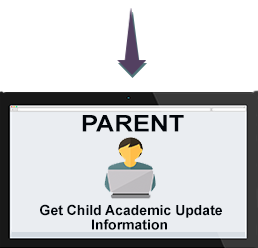
<style>
.page{position:relative;width:258px;height:248px;background:#eaedf1}
.page>*{position:absolute;margin:0}
.t1{font:23.1px "Arial-BoldMT";color:#00040a;scale:1.1 1}
.t2{font:14px "Arial-BoldMT";color:#00040a}
</style>
<div class="page">
<p class="t1" style="left:82px;top:115px;width:102px;height:17px">PARENT</p>
<p class="t2" style="left:40px;top:204px;width:182px;height:14px">Get Child Academic Update</p>
<p class="t2" style="left:92px;top:219px;width:75px;height:11px">Information</p>
</div>
